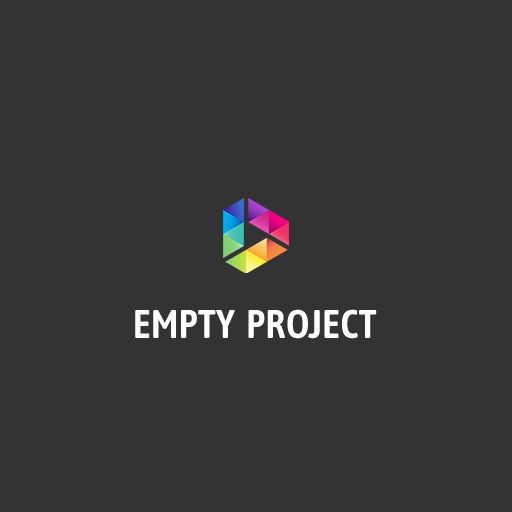
<style>
.page{position:relative;width:512px;height:512px;background:#333333}
.page>*{position:absolute;margin:0}
.t1{font:40px "AsapCondensed-SemiBold";color:#ffffff}
</style>
<div class="page">
<p class="t1" style="left:135px;top:309px;width:242px;height:30px">EMPTY  PROJECT</p>
</div>
